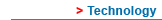
<style>
.page{position:relative;width:162px;height:20px;background:#ffffff}
.page>*{position:absolute;margin:0}
.t1{font:12px "Arial-BoldMT";letter-spacing:0.025em;color:#006fad}
.t2{font:12px "Arial-BoldMT";letter-spacing:0.025em;color:#ff0000}
</style>
<div class="page">
<p class="t1" style="left:76px;top:6px;width:81px;height:11px"><span class="t2">&gt; </span>Technology</p>
</div>
